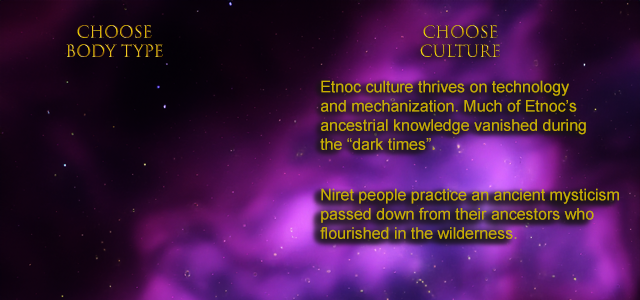
<style>
.page{position:relative;width:640px;height:300px}
.page>*{position:absolute;margin:0}
.t1{font:16px "TrajanColor-Concept"}
.t2{font:16px "ArialMT";color:#c8ae01}
</style>
<div class="page">
<p class="t1" style="left:66px;top:25px;width:97px;height:32px;text-align:center">Choose<br>Body type</p>
<p class="t1" style="left:420px;top:25px;width:80px;height:32px;text-align:center">Choose<br>Culture</p>
<p class="t2" style="left:320px;top:80px;width:266px;height:70px">Etnoc culture thrives on technology<br>and mechanization. Much of Etnoc’s <br>ancestrial knowledge vanished during <br>the “dark times”.</p>
<p class="t2" style="left:320px;top:188px;width:299px;height:51px">Niret people practice an ancient mysticism<br>passed down from their ancestors who <br>flourished in the wilderness.</p>
</div>
